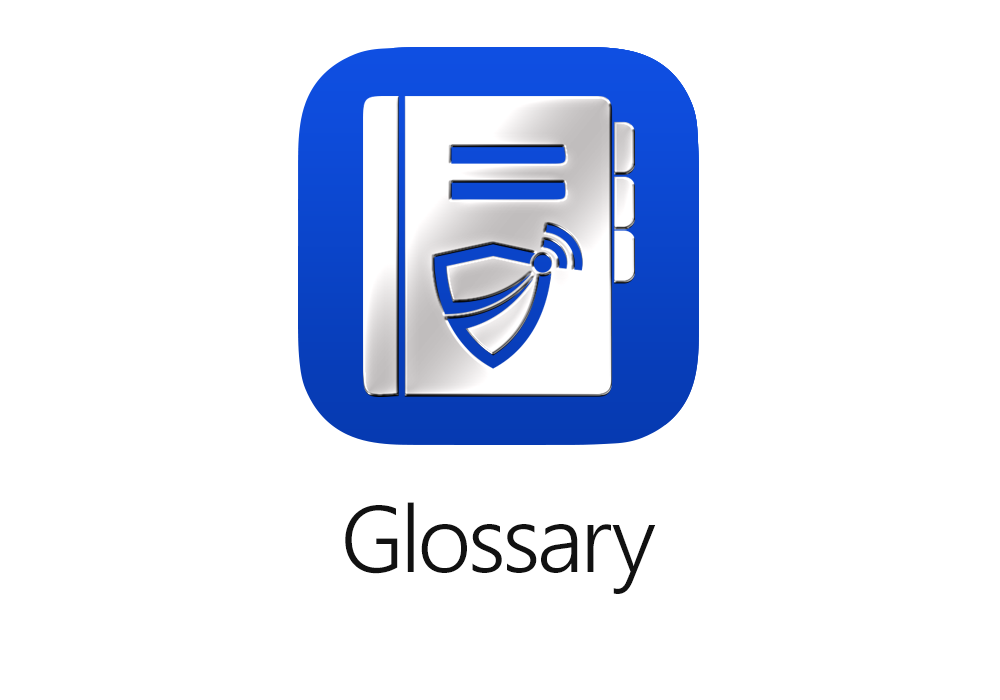
<style>
.page{position:relative;width:1000px;height:700px;background:#ffffff}
.page>*{position:absolute;margin:0}
.t1{font:94px "SegoeUI-Semilight";letter-spacing:-0.04em;color:#111111}
</style>
<div class="page">
<p class="t1" style="left:345px;top:502px;width:311px;height:92px">Glossary</p>
</div>
